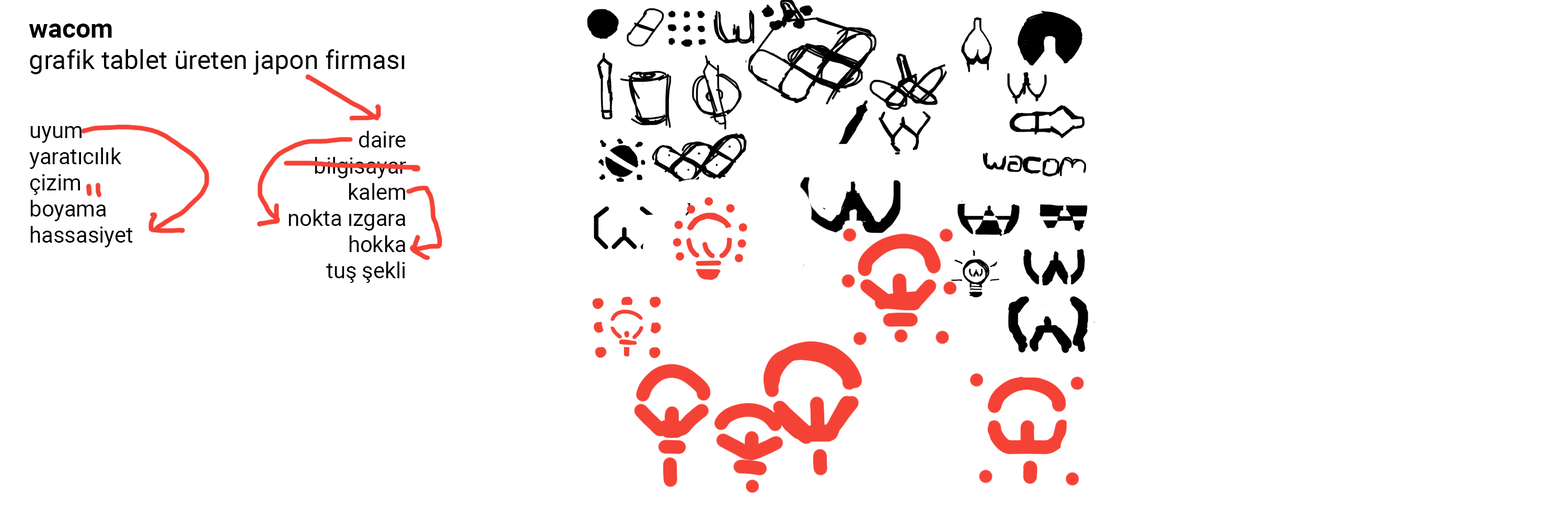
<style>
.page{position:relative;width:1568px;height:523px;background:#ffffff}
.page>*{position:absolute;margin:0}
.t1{font:6.3px "Roboto-Regular";color:#000000}
.t2{font:6.3px "Roboto-Bold";color:#000000}
.t3{font:21.8px "Roboto-Regular";color:#000000}
</style>
<div class="page">
<p class="t1" style="left:29px;top:24px;width:376px;height:51px"><span class="t2">wacom<br></span>grafik tablet üreten japon firması</p>
<p class="t3" style="left:29px;top:126px;width:104px;height:121px">uyum<br>yaratıcılık<br>çizim<br>boyama<br>hassasiyet</p>
<p class="t3" style="left:289px;top:131px;width:117px;height:152px;text-align:right">daire<br>bilgisayar<br>kalem<br>nokta ızgara<br>hokka<br>tuş şekli</p>
</div>
